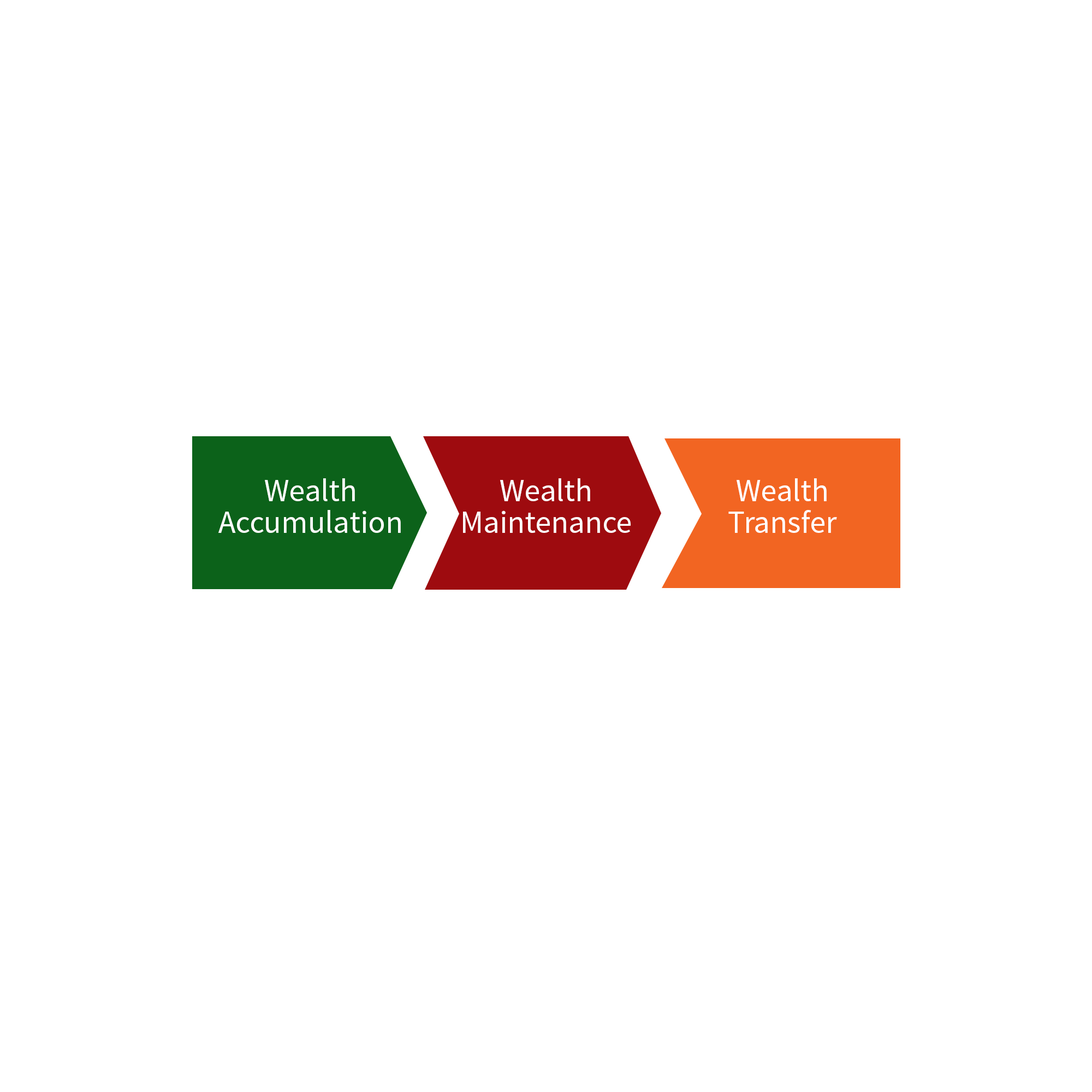
<style>
.page{position:relative;width:1092px;height:1092px;background:#ffffff}
.page>*{position:absolute;margin:0}
.t1{font:31.8px/22.7px "SourceSansPro-Regular";color:#ffffff}
</style>
<div class="page">
<p class="t1" style="left:218px;top:478px;width:183px;height:55px;text-align:center">Wealth<br>Accumulation</p>
<p class="t1" style="left:463px;top:478px;width:168px;height:55px;text-align:center">Wealth<br>Maintenance</p>
<p class="t1" style="left:728px;top:478px;width:109px;height:55px;text-align:center">Wealth<br>Transfer</p>
</div>
